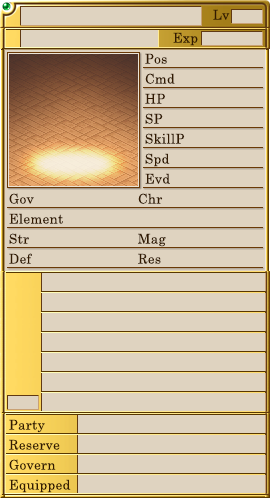
<style>
.page{position:relative;width:272px;height:498px;background:#dfd3c0}
.page>*{position:absolute;margin:0}
.t1{font:13.3px "CenturySchoolbook";letter-spacing:0.025em;color:#321a02}
</style>
<div class="page">
<p class="t1" style="left:213px;top:9px;width:17px;height:11px">Lv</p>
<p class="t1" style="left:173px;top:32px;width:25px;height:14px">Exp</p>
<p class="t1" style="left:145px;top:53px;width:22px;height:11px">Pos</p>
<p class="t1" style="left:145px;top:73px;width:30px;height:11px">Cmd</p>
<p class="t1" style="left:145px;top:93px;width:20px;height:11px">HP</p>
<p class="t1" style="left:145px;top:113px;width:18px;height:11px">SP</p>
<p class="t1" style="left:145px;top:133px;width:40px;height:11px">SkillP</p>
<p class="t1" style="left:145px;top:153px;width:25px;height:14px">Spd</p>
<p class="t1" style="left:145px;top:173px;width:25px;height:11px">Evd</p>
<p class="t1" style="left:9px;top:193px;width:25px;height:11px">Gov</p>
<p class="t1" style="left:138px;top:193px;width:25px;height:11px">Chr</p>
<p class="t1" style="left:9px;top:213px;width:54px;height:11px">Element</p>
<p class="t1" style="left:9px;top:233px;width:20px;height:11px">Str</p>
<p class="t1" style="left:138px;top:233px;width:28px;height:14px">Mag</p>
<p class="t1" style="left:9px;top:253px;width:23px;height:11px">Def</p>
<p class="t1" style="left:138px;top:253px;width:23px;height:11px">Res</p>
<p class="t1" style="left:9px;top:419px;width:36px;height:14px">Party</p>
<p class="t1" style="left:9px;top:439px;width:51px;height:11px">Reserve</p>
<p class="t1" style="left:9px;top:459px;width:47px;height:11px">Govern</p>
<p class="t1" style="left:9px;top:479px;width:62px;height:14px">Equipped</p>
</div>
